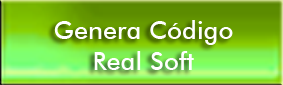
<style>
.page{position:relative;width:283px;height:85px}
.page>*{position:absolute;margin:0}
.t1{font:25.3px "FuturaBT-Medium";color:#ffffff}
</style>
<div class="page">
<p class="t1" style="left:54px;top:20px;width:179px;height:50px;text-align:center">Genera Código<br>Real Soft</p>
</div>
